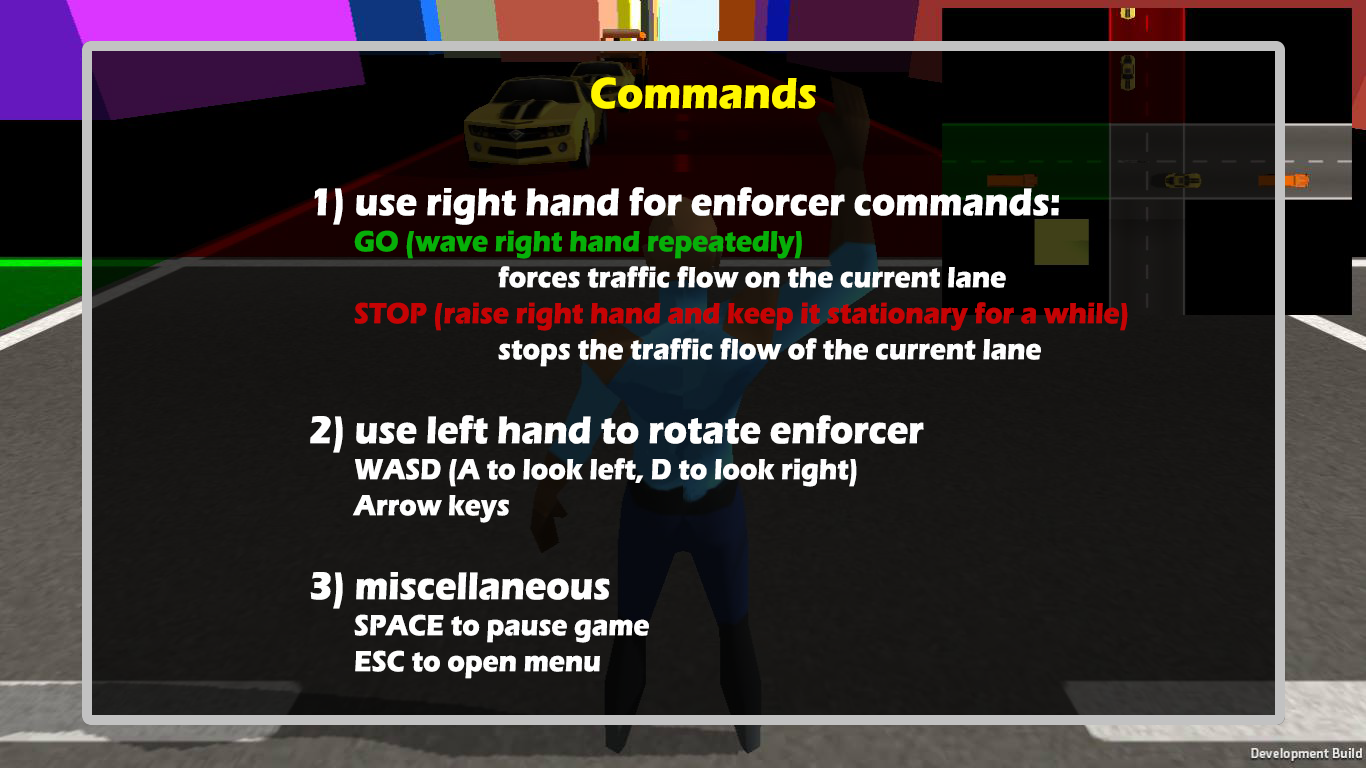
<style>
.page{position:relative;width:1366px;height:768px}
.page>*{position:absolute;margin:0}
.t1{font:45px "ErasITC-Bold";color:#fff600;scale:0.9 1}
.t2{font:30px "ErasITC-Bold";color:#c60304;scale:0.9 1}
.t3{font:40px "ErasITC-Bold";color:#fefefe;scale:0.9 1}
.t4{font:30px "ErasITC-Bold";color:#06b009;scale:0.9 1}
.t5{font:30px "ErasITC-Bold";color:#fefefe;scale:0.9 1}
</style>
<div class="page">
<p class="t1" style="left:591px;top:77px;width:225px;height:32px">Commands</p>
<p class="t2" style="left:310px;top:187px;width:818px;height:492px"><span class="t3">   1) use right hand for enforcer commands:<br>  </span><span class="t4">GO (wave right hand repeatedly)<br></span><span class="t5">      forces traffic flow on the current lane<br>  </span>STOP (raise right hand and keep it stationary for a while)<br><span class="t5">      stops the traffic flow of the current lane<br><br></span><span class="t3">   2) use left hand to rotate enforcer<br></span><span class="t5">  WASD (A to look left, D to look right)<br>  Arrow keys<br><br></span><span class="t3">   3) miscellaneous<br></span><span class="t5">  SPACE to pause game<br>  ESC to open menu</span></p>
</div>
